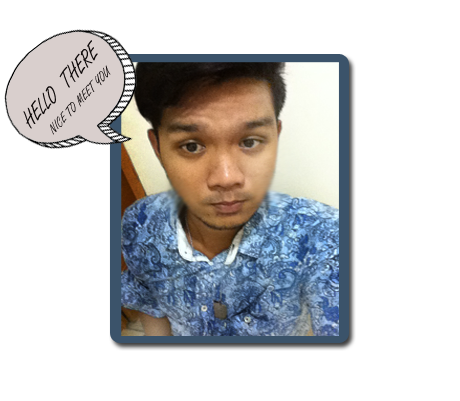
<style>
.page{position:relative;width:460px;height:401px;background:#ffffff}
.page>*{position:absolute;margin:0}
.t1{font:14.5px "FreestyleScript-Regular";color:#0f0a0a;text-transform:uppercase;scale:0.91 1}
.t2{font:24.3px "FreestyleScript-Regular";color:#0f0a0a;text-transform:uppercase;scale:0.91 1}
</style>
<div class="page">
<p class="t1" style="left:23px;top:40px;width:88px;height:95px;rotate:-47deg"><span class="t2">hello  there<br>  </span>nice to meet you</p>
</div>
